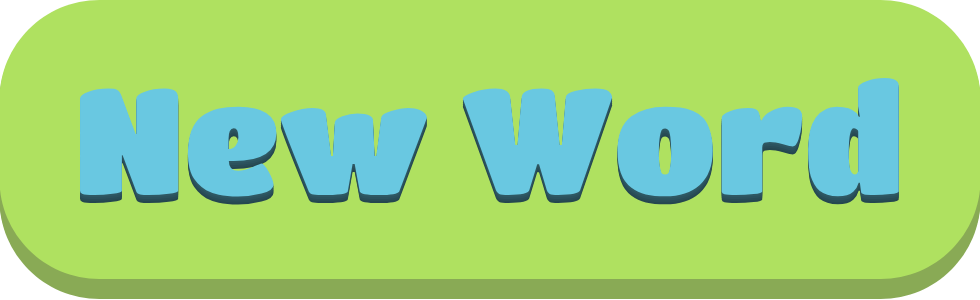
<style>
.page{position:relative;width:980px;height:300px;background:#afe160}
.page>*{position:absolute;margin:0}
.t1{font:150px "TitanOne";color:#69c8e1}
</style>
<div class="page">
<p class="t1" style="left:80px;top:78px;width:819px;height:119px">New Word</p>
</div>
